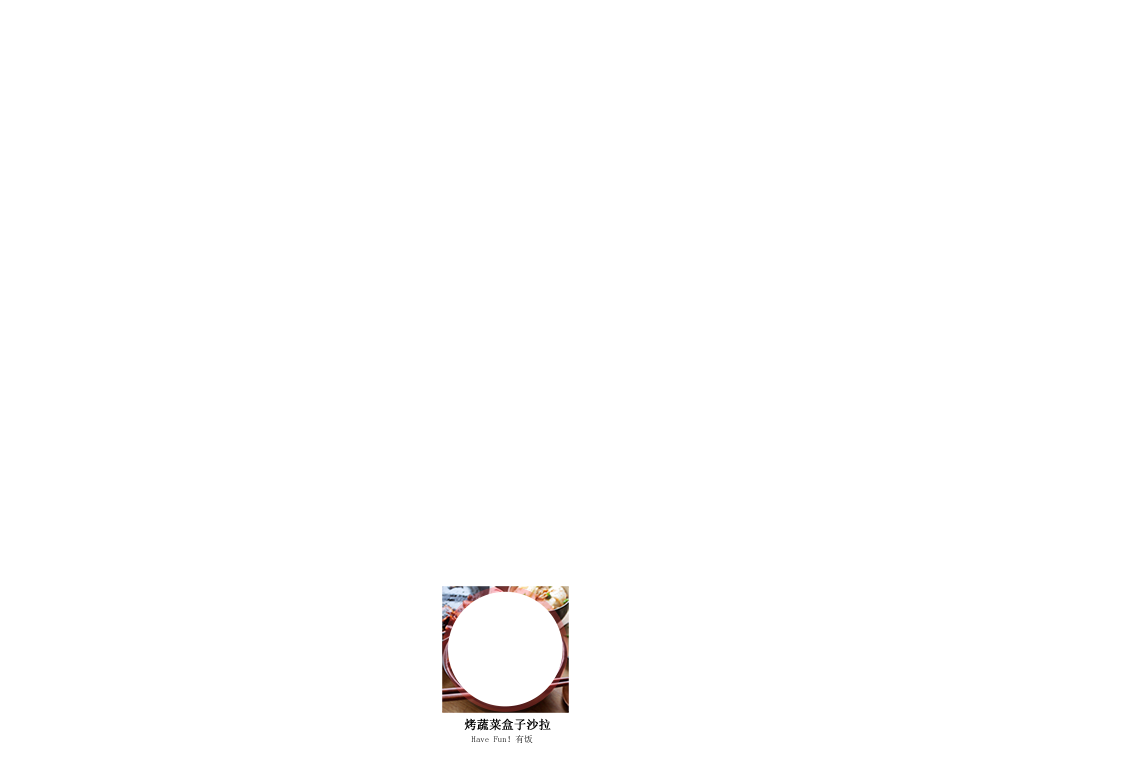
<style>
.page{position:relative;width:1140px;height:760px;background:#ffffff}
.page>*{position:absolute;margin:0}
.t1{font:12.2px "SimSun";color:#000000;font-weight:bold}
.t2{font:8.8px "SimSun"}
</style>
<div class="page">
<p class="t1" style="left:464px;top:718px;width:87px;height:13px">烤蔬菜盒子沙拉</p>
<p class="t2" style="left:471px;top:735px;width:62px;height:8px">Have Fun！有饭</p>
</div>
